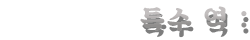
<style>
.page{position:relative;width:250px;height:40px;background:#ffffff}
.page>*{position:absolute;margin:0}
.t1{font:26.9px "SDKukdetopokki-bBd";letter-spacing:0.08em}
</style>
<div class="page">
<p class="t1" style="left:140px;top:6px;width:107px;height:26px">특수 역 :</p>
</div>
